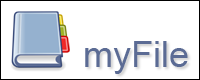
<style>
.page{position:relative;width:200px;height:80px;background:#ffffff}
.page>*{position:absolute;margin:0}
.t1{font:36px "ArialMT";color:#5b6b94}
</style>
<div class="page">
<p class="t1" style="left:85px;top:41px;width:103px;height:33px">myFile</p>
</div>
